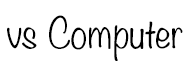
<style>
.page{position:relative;width:191px;height:83px;background:#ffffff}
.page>*{position:absolute;margin:0}
.t1{font:37.5px "Noteworthy-Light";color:#000000}
</style>
<div class="page">
<p class="t1" style="left:7px;top:15px;width:176px;height:46px">vs Computer</p>
</div>
